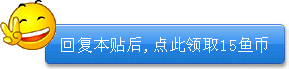
<style>
.page{position:relative;width:289px;height:69px;background:#ffffff}
.page>*{position:absolute;margin:0}
.t1{font:16px "SimSun";letter-spacing:0.05em;color:#ffffff}
</style>
<div class="page">
<p class="t1" style="left:61px;top:37px;width:207px;height:16px">回复本贴后,点此领取15鱼币</p>
</div>
